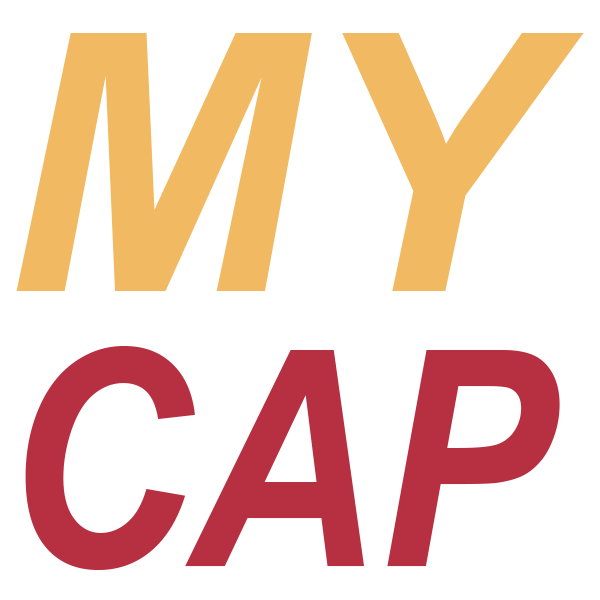
<style>
.page{position:relative;width:600px;height:600px;background:#ffffff}
.page>*{position:absolute;margin:0}
.t1{font:301.6px/275px "Arial-BoldItalicMT";color:#b73041;scale:0.86 1}
.t2{font:360px/275px "Arial-BoldItalicMT";color:#f1b962}
</style>
<div class="page">
<p class="t1" style="left:16px;top:33px;width:568px;height:537px"><span class="t2">MY<br></span>CAP</p>
</div>
